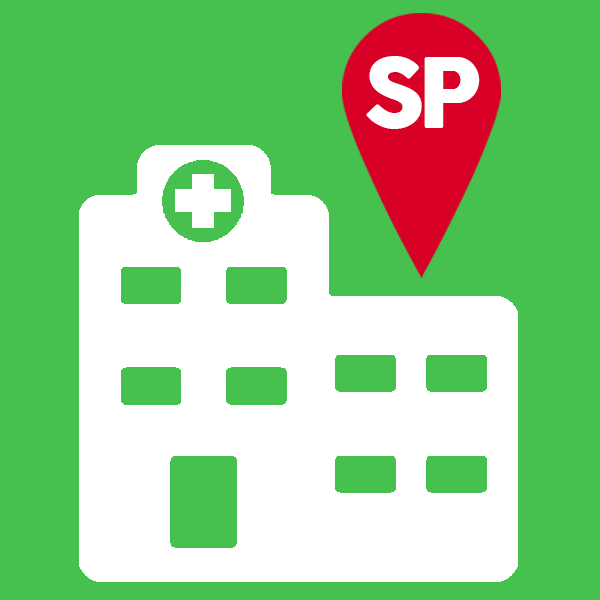
<style>
.page{position:relative;width:600px;height:600px;background:#46c14f}
.page>*{position:absolute;margin:0}
.t1{font:95.3px "COCOGOOSE";letter-spacing:-0.075em;color:#ffffff;text-transform:uppercase}
</style>
<div class="page">
<p class="t1" style="left:366px;top:56px;width:114px;height:73px">SP</p>
</div>
